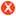
<style>
.page{position:relative;width:16px;height:16px;background:#ffffff}
.page>*{position:absolute;margin:0}
.t1{font:11.5px "ArialMT";color:#ffffff}
</style>
<div class="page">
<p class="t1" style="left:4px;top:3px;width:8px;height:9px">X</p>
</div>
